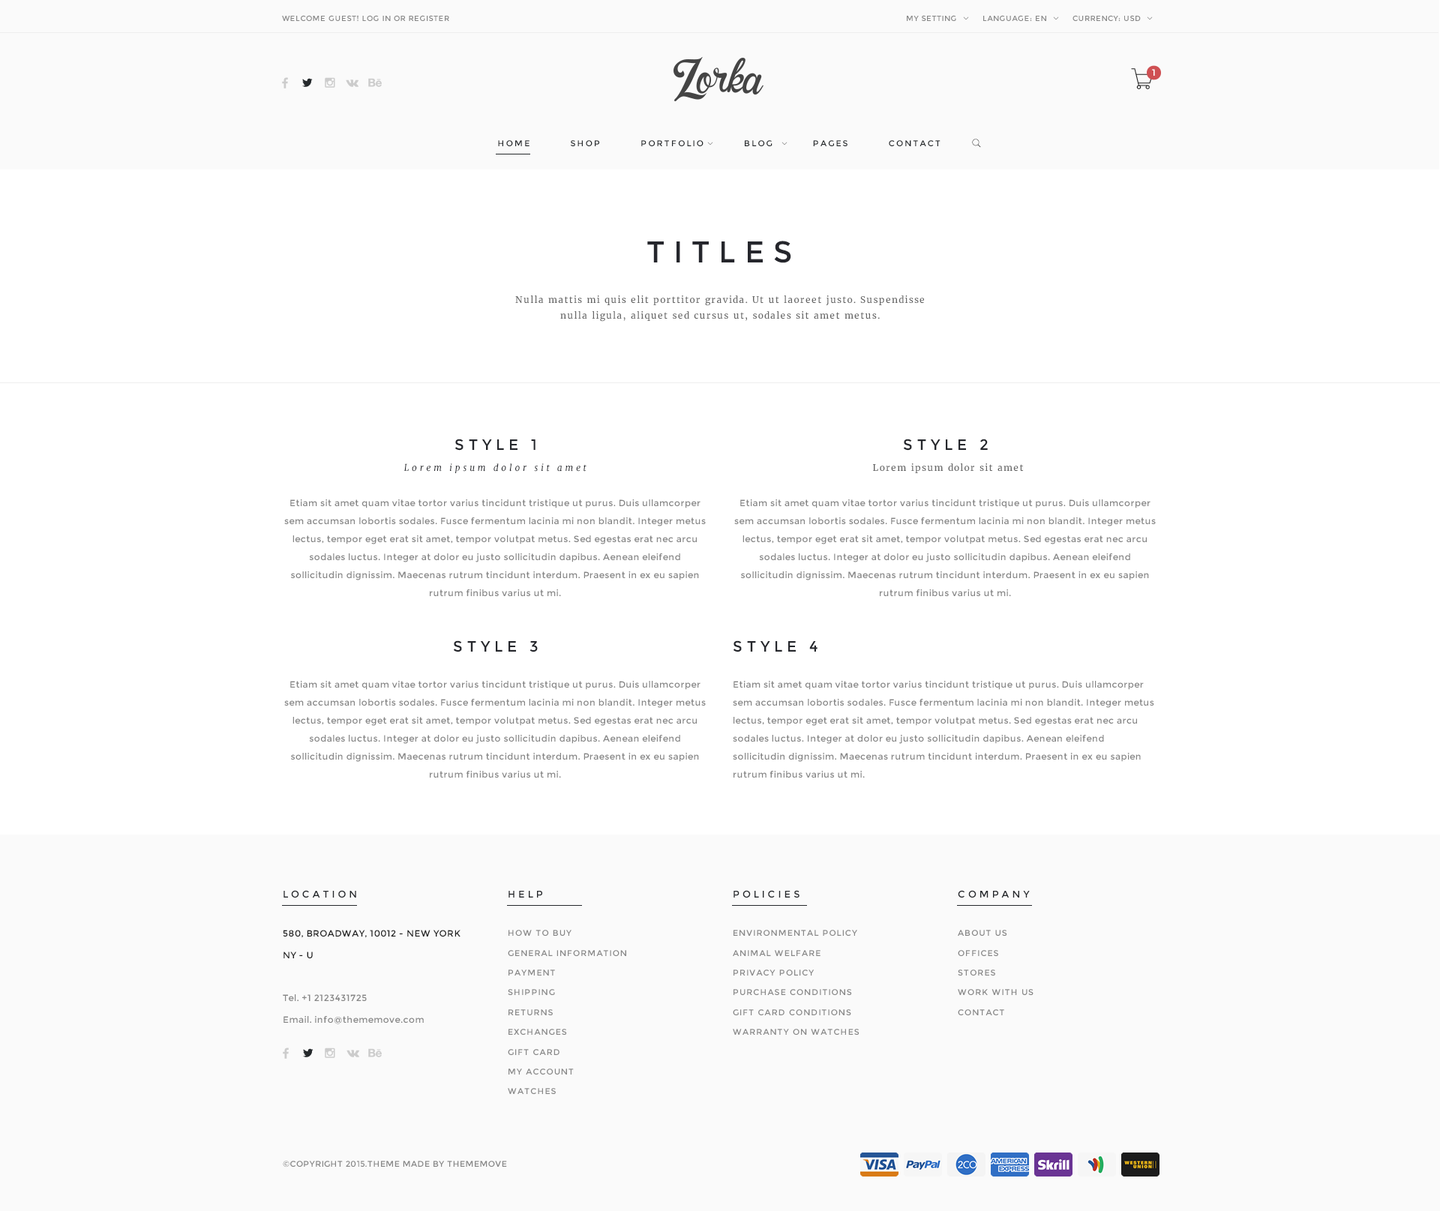
<style>
.page{position:relative;width:1440px;height:1211px;background:#ffffff}
.page>*{position:absolute;margin:0}
.t1{font:7.5px "Montserrat-Regular";letter-spacing:0.05em;color:#888888}
.t2{font:9px "Montserrat-Regular";letter-spacing:0.3em;color:#ffffff}
.t3{font:8.2px "Montserrat-Regular";letter-spacing:0.2em;color:#25292c}
.t4{font:30px "Montserrat-Regular";letter-spacing:0.3em;color:#25262c}
.t5{font:9px/16.2px "Merriweather-Regular";letter-spacing:0.1em;color:#666666}
.t6{font:15px "Montserrat-Regular";letter-spacing:0.3em;color:#25272c}
.t7{font:9px "Merriweather-Italic";letter-spacing:0.3em;color:#25272c}
.t8{font:9px "Merriweather-Regular";letter-spacing:0.1em;color:#666666}
.t9{font:9px/18px "Montserrat-Regular";letter-spacing:0.04em;color:#858585}
.t10{font:9.8px "Montserrat-Regular";letter-spacing:0.3em;color:#25282c}
.t11{font:9px/21.6px "Montserrat-Regular";letter-spacing:0.04em;color:#868686}
.t12{font:9px/21.6px "Montserrat-Regular";letter-spacing:0.04em;color:#202020}
.t13{font:8.2px/19.8px "Montserrat-Regular";letter-spacing:0.1em;color:#888888}
.t14{font:8.2px/19.8px "Montserrat-Regular";letter-spacing:0.1em;color:#878787}
.t15{font:8.2px "Montserrat-Regular";letter-spacing:0.04em;color:#868686}
</style>
<div class="page">
<p class="t1" style="left:282px;top:15px;width:167px;height:6px">WELCOME GUEST! LOG IN OR REGISTER</p>
<p class="t1" style="left:907px;top:15px;width:49px;height:6px">MY SETTING</p>
<p class="t1" style="left:983px;top:15px;width:63px;height:6px">LANGUAGE: EN</p>
<p class="t1" style="left:1072px;top:15px;width:69px;height:6px">CURRENCY: USD</p>
<p class="t2" style="left:1152px;top:69px;width:3px;height:7px">1</p>
<p class="t3" style="left:498px;top:140px;width:442px;height:6px">HOME          SHOP          PORTFOLIO          BLOG          PAGES          CONTACT</p>
<p class="t4" style="left:647px;top:241px;width:144px;height:22px">TITLES</p>
<p class="t5" style="left:515px;top:296px;width:409px;height:26px;text-align:center">Nulla mattis mi quis elit porttitor gravida. Ut ut laoreet justo. Suspendisse nulla ligula, aliquet sed cursus ut, sodales sit amet metus.</p>
<p class="t6" style="left:454px;top:439px;width:82px;height:12px">STYLE 1</p>
<p class="t6" style="left:903px;top:439px;width:85px;height:12px">STYLE 2</p>
<p class="t7" style="left:404px;top:464px;width:182px;height:9px">Lorem ipsum dolor sit amet</p>
<p class="t8" style="left:873px;top:464px;width:151px;height:9px">Lorem ipsum dolor sit amet</p>
<p class="t9" style="left:284px;top:500px;width:422px;height:96px;text-align:center">Etiam sit amet quam vitae tortor varius tincidunt tristique ut purus. Duis ullamcorper sem accumsan lobortis sodales. Fusce fermentum lacinia mi non blandit. Integer metus lectus, tempor eget erat sit amet, tempor volutpat metus. Sed egestas erat nec arcu sodales luctus. Integer at dolor eu justo sollicitudin dapibus. Aenean eleifend sollicitudin dignissim. Maecenas rutrum tincidunt interdum. Praesent in ex eu sapien rutrum finibus varius ut mi.</p>
<p class="t9" style="left:734px;top:500px;width:422px;height:96px;text-align:center">Etiam sit amet quam vitae tortor varius tincidunt tristique ut purus. Duis ullamcorper sem accumsan lobortis sodales. Fusce fermentum lacinia mi non blandit. Integer metus lectus, tempor eget erat sit amet, tempor volutpat metus. Sed egestas erat nec arcu sodales luctus. Integer at dolor eu justo sollicitudin dapibus. Aenean eleifend sollicitudin dignissim. Maecenas rutrum tincidunt interdum. Praesent in ex eu sapien rutrum finibus varius ut mi.</p>
<p class="t6" style="left:453px;top:640px;width:85px;height:12px">STYLE 3</p>
<p class="t6" style="left:733px;top:640px;width:85px;height:12px">STYLE 4</p>
<p class="t9" style="left:284px;top:681px;width:422px;height:97px;text-align:center">Etiam sit amet quam vitae tortor varius tincidunt tristique ut purus. Duis ullamcorper sem accumsan lobortis sodales. Fusce fermentum lacinia mi non blandit. Integer metus lectus, tempor eget erat sit amet, tempor volutpat metus. Sed egestas erat nec arcu sodales luctus. Integer at dolor eu justo sollicitudin dapibus. Aenean eleifend sollicitudin dignissim. Maecenas rutrum tincidunt interdum. Praesent in ex eu sapien rutrum finibus varius ut mi.</p>
<p class="t9" style="left:733px;top:681px;width:421px;height:97px">Etiam sit amet quam vitae tortor varius tincidunt tristique ut purus. Duis ullamcorper sem accumsan lobortis sodales. Fusce fermentum lacinia mi non blandit. Integer metus lectus, tempor eget erat sit amet, tempor volutpat metus. Sed egestas erat nec arcu sodales luctus. Integer at dolor eu justo sollicitudin dapibus. Aenean eleifend sollicitudin dignissim. Maecenas rutrum tincidunt interdum. Praesent in ex eu sapien rutrum finibus varius ut mi.</p>
<p class="t10" style="left:284px;top:890px;width:72px;height:8px">LOCATION</p>
<p class="t10" style="left:508px;top:891px;width:34px;height:7px">HELP</p>
<p class="t10" style="left:734px;top:890px;width:66px;height:8px">POLICIES</p>
<p class="t10" style="left:958px;top:890px;width:72px;height:8px">COMPANY</p>
<p class="t11" style="left:283px;top:930px;width:177px;height:94px"><span class="t12">580, BROADWAY, 10012 - NEW YORK <br>NY - U<br><br></span>Tel. +1 2123431725<br>Email. info@thememove.com</p>
<p class="t13" style="left:508px;top:930px;width:118px;height:164px">HOW TO BUY<br>GENERAL INFORMATION<br>PAYMENT<br>SHIPPING<br>RETURNS<br>EXCHANGES<br>GIFT CARD<br>MY ACCOUNT<br>WATCHES</p>
<p class="t13" style="left:733px;top:930px;width:127px;height:105px">ENVIRONMENTAL POLICY<br>ANIMAL WELFARE<br>PRIVACY POLICY<br>PURCHASE CONDITIONS<br>GIFT CARD CONDITIONS<br>WARRANTY ON WATCHES</p>
<p class="t14" style="left:958px;top:930px;width:76px;height:86px">ABOUT US<br>OFFICES<br>STORES<br>WORK WITH US<br>CONTACT</p>
<p class="t15" style="left:283px;top:1161px;width:224px;height:7px">©COPYRIGHT 2015.THEME MADE BY THEMEMOVE</p>
</div>
